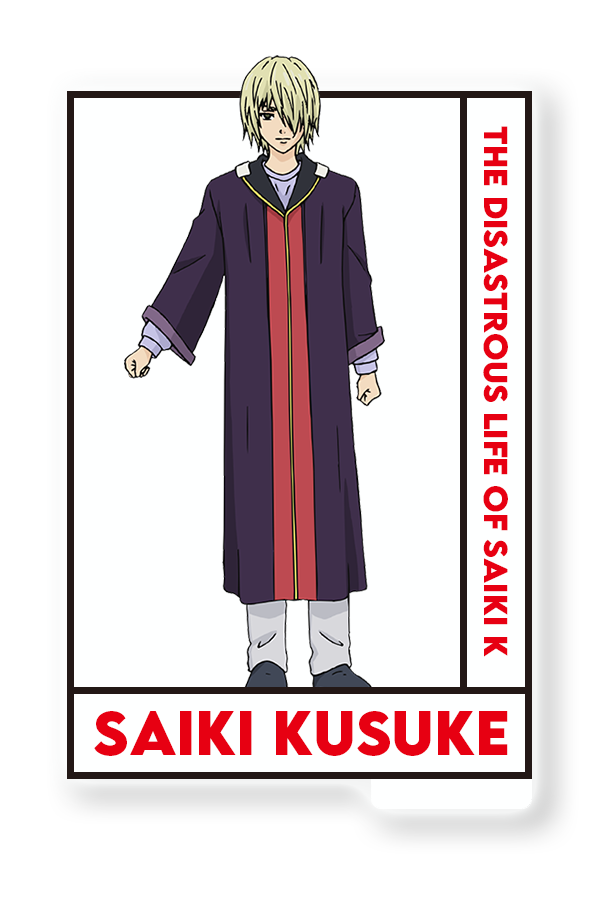
<style>
.page{position:relative;width:600px;height:900px;background:#feffff}
.page>*{position:absolute;margin:0}
.t1{font:29.6px "LEMONMILK-Bold";color:#e70012}
.t2{font:55.4px "LEMONMILK-Bold";color:#e70012}
</style>
<div class="page">
<p class="t1" style="left:483px;top:126px;width:25px;height:531px;rotate:90deg">THE disastrous Life of saiki K</p>
<p class="t2" style="left:94px;top:711px;width:414px;height:45px">Saiki Kusuke</p>
</div>
